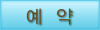
<style>
.page{position:relative;width:100px;height:30px}
.page>*{position:absolute;margin:0}
.t1{font:18px "YGO125";color:#5d4b24}
</style>
<div class="page">
<p class="t1" style="left:26px;top:8px;width:47px;height:17px">예  약</p>
</div>
